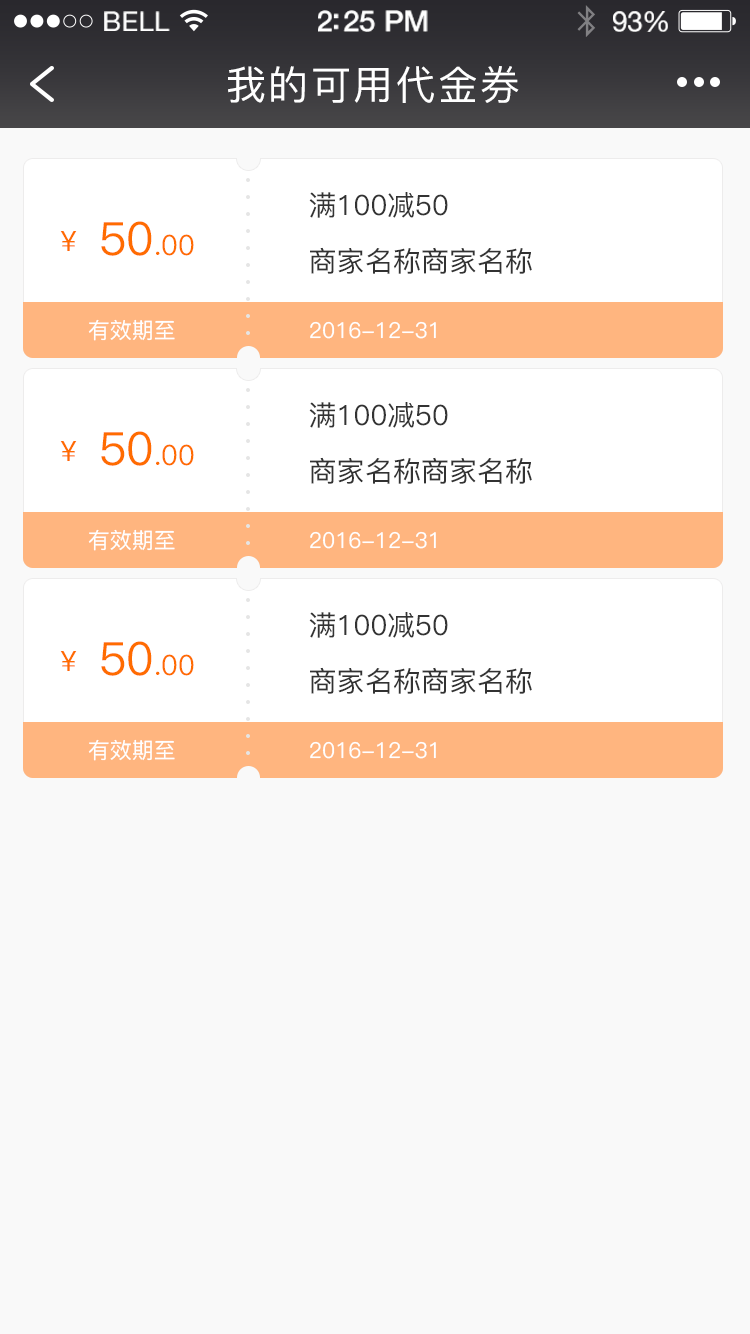
<style>
.page{position:relative;width:750px;height:1334px;background:#f9f9f9}
.page>*{position:absolute;margin:0}
.t1{font:27px "HelveticaNeue";letter-spacing:0.02em;color:#ffffff}
.t2{font:29.4px "HelveticaNeue-Medium";letter-spacing:-0.02em;color:#ffffff}
.t3{font:28.2px "HelveticaNeue";letter-spacing:-0.02em;color:#ffffff}
.t4{font:40px "PingFang-SC-Medium";letter-spacing:0.06em;color:#ffffff}
.t5{font:28px "PingFang-SC-Medium";color:#333333}
.t6{font:28px "PingFang-SC-Medium";color:#ff6c00}
.t7{font:46px "PingFang-SC-Medium";color:#ff6c00}
.t8{font:28px "PingFang-SC-Medium";color:#323232}
.t9{font:22px "PingFang-SC-Medium";color:#ffffff}
</style>
<div class="page">
<p class="t1" style="left:104px;top:11px;width:66px;height:20px">BELL</p>
<p class="t2" style="left:318px;top:10px;width:110px;height:22px">2:25 PM</p>
<p class="t3" style="left:613px;top:11px;width:55px;height:21px">93%</p>
<p class="t4" style="left:228px;top:66px;width:291px;height:37px">我的可用代金券</p>
<p class="t5" style="left:309px;top:192px;width:139px;height:26px">满100减50</p>
<p class="t6" style="left:101px;top:221px;width:93px;height:35px"><span class="t7">50</span>.00</p>
<p class="t6" style="left:60px;top:231px;width:17px;height:20px">￥</p>
<p class="t8" style="left:310px;top:247px;width:222px;height:27px">商家名称商家名称</p>
<p class="t9" style="left:88px;top:319px;width:87px;height:22px">有效期至</p>
<p class="t9" style="left:310px;top:321px;width:126px;height:18px">2016-12-31</p>
<p class="t5" style="left:309px;top:402px;width:139px;height:26px">满100减50</p>
<p class="t6" style="left:101px;top:431px;width:93px;height:35px"><span class="t7">50</span>.00</p>
<p class="t6" style="left:60px;top:441px;width:17px;height:20px">￥</p>
<p class="t8" style="left:310px;top:457px;width:222px;height:27px">商家名称商家名称</p>
<p class="t9" style="left:88px;top:529px;width:87px;height:22px">有效期至</p>
<p class="t9" style="left:310px;top:531px;width:126px;height:18px">2016-12-31</p>
<p class="t5" style="left:309px;top:612px;width:139px;height:26px">满100减50</p>
<p class="t6" style="left:101px;top:641px;width:93px;height:35px"><span class="t7">50</span>.00</p>
<p class="t6" style="left:60px;top:651px;width:17px;height:20px">￥</p>
<p class="t8" style="left:310px;top:667px;width:222px;height:27px">商家名称商家名称</p>
<p class="t9" style="left:88px;top:739px;width:87px;height:22px">有效期至</p>
<p class="t9" style="left:310px;top:741px;width:126px;height:18px">2016-12-31</p>
</div>
